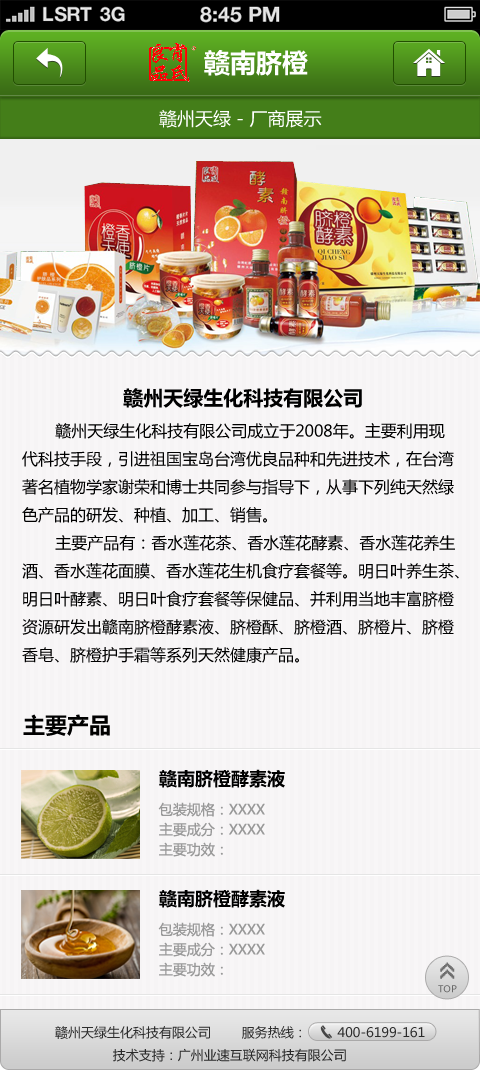
<style>
.page{position:relative;width:480px;height:1070px;background:#f6f4f5}
.page>*{position:absolute;margin:0}
.t1{font:26px "MicrosoftYaHeiBold";color:#ffffff}
.t2{font:18px "MicrosoftYaHei";color:#ffffff}
.t3{font:16px "MicrosoftYaHei";color:#000000}
.t4{font:20px "MicrosoftYaHeiBold";color:#000000}
.t5{font:22px "MicrosoftYaHeiBold";color:#000000}
.t6{font:18px "MicrosoftYaHeiBold";color:#000000}
.t7{font:14px/20px "MicrosoftYaHei";color:#999999}
.t8{font:26px "8514oem";letter-spacing:-0.2em;color:#6f6f6f;font-weight:bold}
.t9{font:9.3px "MicrosoftYaHei";color:#686868}
.t10{font:13px "MicrosoftYaHei";color:#2c2c2c}
</style>
<div class="page">
<p class="t1" style="left:204px;top:50px;width:104px;height:26px">赣南脐橙</p>
<p class="t2" style="left:159px;top:109px;width:163px;height:19px">赣州天绿 - 厂商展示</p>
<p class="t3" style="left:22px;top:388px;width:437px;height:275px"><span class="t4">                 赣州天绿生化科技有限公司<br></span>       赣州天绿生化科技有限公司成立于2008年。主要利用现<br>代科技手段，引进祖国宝岛台湾优良品种和先进技术，在台湾<br>著名植物学家谢荣和博士共同参与指导下，从事下列纯天然绿<br>色产品的研发、种植、加工、销售。<br>       主要产品有：香水莲花茶、香水莲花酵素、香水莲花养生<br>酒、香水莲花面膜、香水莲花生机食疗套餐等。明日叶养生茶、<br>明日叶酵素、明日叶食疗套餐等保健品、并利用当地丰富脐橙<br>资源研发出赣南脐橙酵素液、脐橙酥、脐橙酒、脐橙片、脐橙<br>香皂、脐橙护手霜等系列天然健康产品。</p>
<p class="t5" style="left:23px;top:714px;width:87px;height:22px">主要产品</p>
<p class="t6" style="left:159px;top:769px;width:126px;height:19px">赣南脐橙酵素液</p>
<p class="t7" style="left:158px;top:802px;width:107px;height:55px">包装规格：XXXX<br>主要成分：XXXX<br>主要功效：</p>
<p class="t6" style="left:159px;top:889px;width:126px;height:19px">赣南脐橙酵素液</p>
<p class="t7" style="left:158px;top:922px;width:107px;height:55px">包装规格：XXXX<br>主要成分：XXXX<br>主要功效：</p>
<p class="t8" style="left:440px;top:962px;width:15px;height:17px;rotate:-90deg">&gt;&gt;</p>
<p class="t9" style="left:438px;top:985px;width:19px;height:8px">TOP</p>
<p class="t10" style="left:55px;top:1026px;width:370px;height:36px">赣州天绿生化科技有限公司        服务热线：        400-6199-161<br>               技术支持：广州业速互联网科技有限公司</p>
</div>
